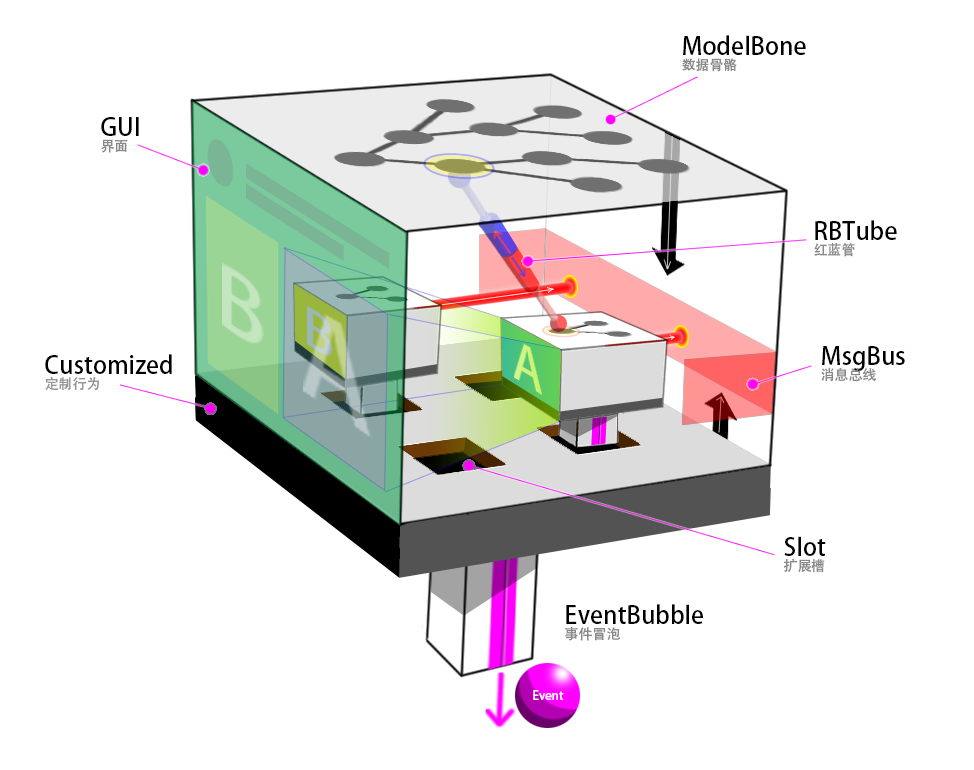
<style>
.page{position:relative;width:974px;height:770px;background:#ffffff}
.page>*{position:absolute;margin:0}
.t1{font:24px/24px "AdobeHeitiStd-Regular";color:#000000}
.t2{font:14px/24px "AdobeHeitiStd-Regular";color:#898989}
.t3{font:14px/24px "AdobeHeitiStd-Regular";color:#959595}
.t4{font:12px "AdobeHeitiStd-Regular";color:#ffffff}
</style>
<div class="page">
<p class="t1" style="left:682px;top:35px;width:124px;height:37px">ModelBone<br><span class="t2">数据骨骼</span></p>
<p class="t1" style="left:101px;top:117px;width:38px;height:36px">GUI<br><span class="t2">界面</span></p>
<p class="t1" style="left:814px;top:220px;width:83px;height:37px">RBTube<br><span class="t2">红蓝管</span></p>
<p class="t1" style="left:821px;top:346px;width:84px;height:36px">MsgBus<br><span class="t2">消息总线</span></p>
<p class="t1" style="left:45px;top:354px;width:127px;height:36px">Customized<br><span class="t3">定制行为</span></p>
<p class="t1" style="left:784px;top:536px;width:42px;height:37px">Slot<br><span class="t2">扩展槽</span></p>
<p class="t1" style="left:565px;top:604px;width:138px;height:37px">EventBubble<br><span class="t2">事件冒泡</span></p>
<p class="t4" style="left:533px;top:690px;width:31px;height:10px">Event</p>
</div>
